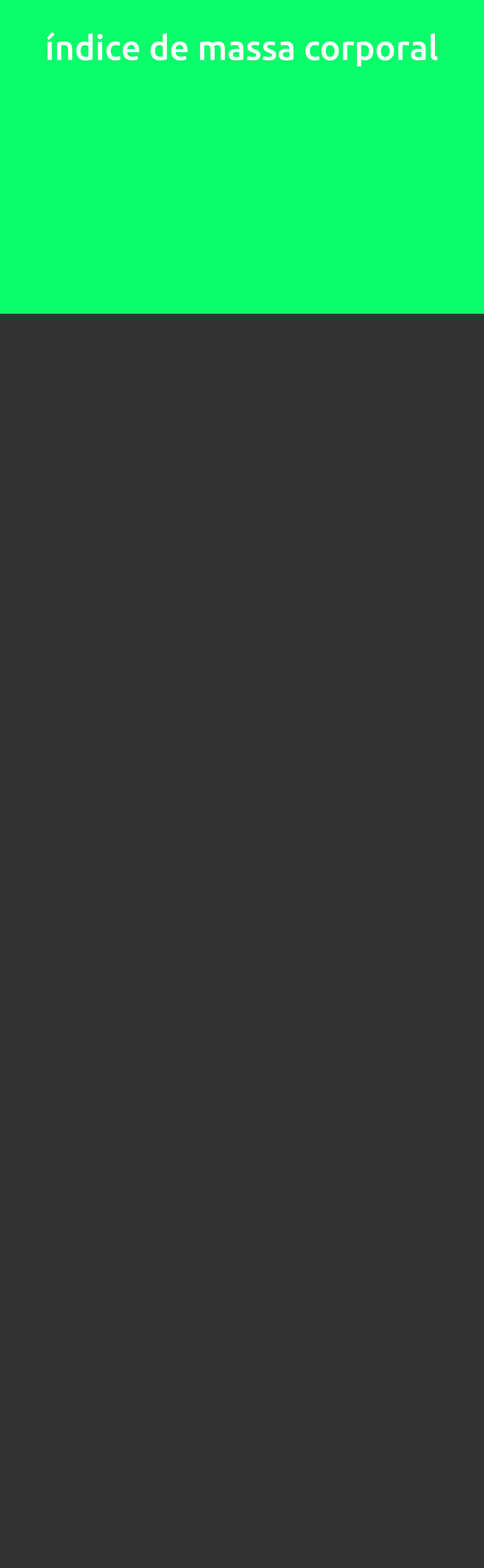
<style>
.page{position:relative;width:484px;height:1568px;background:#333333}
.page>*{position:absolute;margin:0}
.t1{font:34.6px "Ubuntu-Medium";color:#fefefe}
</style>
<div class="page">
<p class="t1" style="left:47px;top:32px;width:391px;height:34px">índice de massa corporal</p>
</div>
